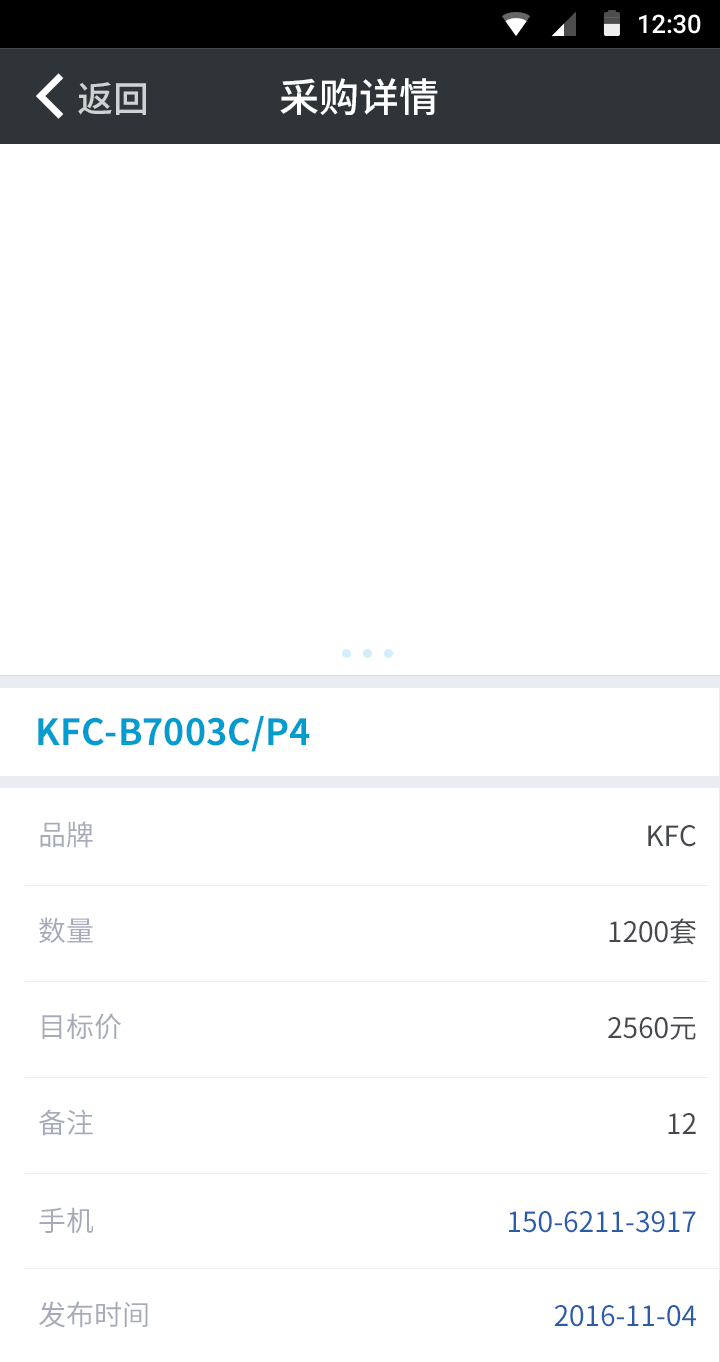
<style>
.page{position:relative;width:720px;height:1362px;background:#ffffff}
.page>*{position:absolute;margin:0}
.t1{font:25.4px "Roboto-Medium";color:#ffffff}
.t2{font:40px "SourceHanSansCN-Medium";color:#ffffff}
.t3{font:36px "SourceHanSansCN-Medium";color:#d0d1d1}
.t4{font:36px "SourceHanSansCN-Bold";color:#029ccf}
.t5{font:28px/96px "SourceHanSansCN-Regular";color:#a5abb8}
.t6{font:28px/96px "SourceHanSansCN-Regular";color:#45484d}
.t7{font:28px "SourceHanSansCN-Regular";color:#a5abb8}
.t8{font:28px "SourceHanSansCN-Regular";color:#2a5da9}
</style>
<div class="page">
<p class="t1" style="left:639px;top:14px;width:62px;height:20px">12:30</p>
<p class="t2" style="left:280px;top:78px;width:158px;height:37px">采购详情</p>
<p class="t3" style="left:78px;top:82px;width:68px;height:33px">返回</p>
<p class="t4" style="left:38px;top:716px;width:272px;height:36px">KFC-B7003C/P4</p>
<p class="t5" style="left:39px;top:821px;width:82px;height:315px">品牌<br>数量<br>目标价<br>备注</p>
<p class="t6" style="left:608px;top:825px;width:88px;height:309px;text-align:right">KFC<br>1200套<br>2560元<br>12</p>
<p class="t7" style="left:39px;top:1207px;width:54px;height:27px">手机</p>
<p class="t8" style="left:509px;top:1211px;width:187px;height:22px">150-6211-3917</p>
<p class="t7" style="left:39px;top:1301px;width:109px;height:27px">发布时间</p>
<p class="t8" style="left:554px;top:1305px;width:142px;height:22px">2016-11-04</p>
</div>
